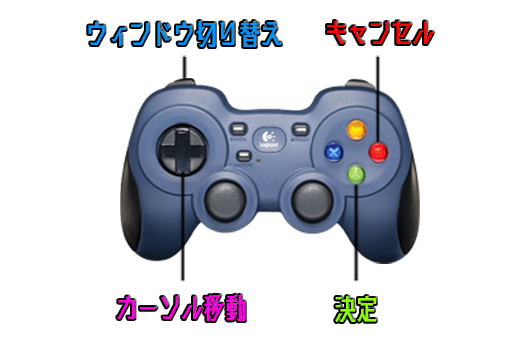
<style>
.page{position:relative;width:521px;height:342px;background:#ffffff}
.page>*{position:absolute;margin:0}
.t1{font:31.2px "Kaisotai-Next-UP-B";letter-spacing:-0.1em;color:#0096ff}
.t2{font:31.2px "Kaisotai-Next-UP-B";letter-spacing:-0.1em;color:#ff0000}
.t3{font:31.2px "Kaisotai-Next-UP-B";letter-spacing:-0.1em;color:#ff00e4}
.t4{font:31.2px "Kaisotai-Next-UP-B";letter-spacing:-0.1em;color:#8bff00}
</style>
<div class="page">
<p class="t1" style="left:88px;top:21px;width:193px;height:26px">ウィンドウ切り替え</p>
<p class="t2" style="left:327px;top:21px;width:107px;height:23px">キャンセル</p>
<p class="t3" style="left:117px;top:294px;width:128px;height:27px">カーソル移動</p>
<p class="t4" style="left:335px;top:296px;width:41px;height:26px">決定</p>
</div>
